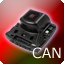
<style>
.page{position:relative;width:64px;height:64px}
.page>*{position:absolute;margin:0}
.t1{font:13.9px "Verdana";color:#ffffff}
</style>
<div class="page">
<p class="t1" style="left:32px;top:47px;width:29px;height:12px">CAN</p>
</div>
